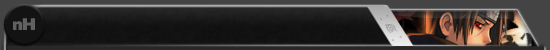
<style>
.page{position:relative;width:550px;height:50px}
.page>*{position:absolute;margin:0}
.t1{font:15px "BorisBlackBloxx";color:#616161}
</style>
<div class="page">
<p class="t1" style="left:13px;top:18px;width:22px;height:12px">nH</p>
</div>
